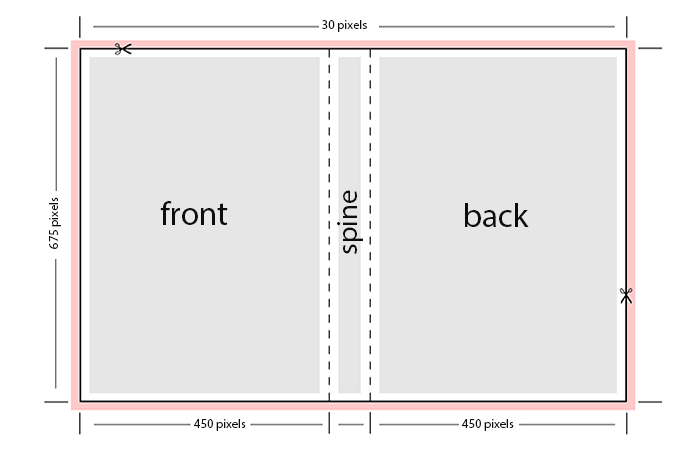
<style>
.page{position:relative;width:700px;height:459px;background:#e6e6e6}
.page>*{position:absolute;margin:0}
.t1{font:12.5px "MyriadPro-Regular";color:#0e0d0d}
.t2{font:29.2px "MyriadPro-Regular";color:#0e0d0d}
.t3{font:33.4px "MyriadPro-Regular";color:#0e0d0d}
</style>
<div class="page">
<p class="t1" style="left:322px;top:20px;width:45px;height:12px">30 pixels</p>
<p class="t1" style="left:49px;top:197px;width:12px;height:52px;rotate:-90deg">675 pixels</p>
<p class="t2" style="left:337px;top:190px;width:26px;height:64px;rotate:-90deg">spine</p>
<p class="t3" style="left:160px;top:201px;width:68px;height:24px">front</p>
<p class="t3" style="left:465px;top:203px;width:64px;height:24px">back</p>
<p class="t1" style="left:194px;top:419px;width:52px;height:12px">450 pixels</p>
<p class="t1" style="left:462px;top:419px;width:52px;height:12px">450 pixels</p>
</div>
